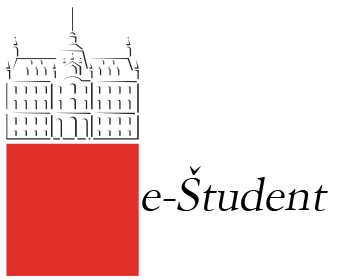
<style>
.page{position:relative;width:338px;height:280px;background:#ffffff}
.page>*{position:absolute;margin:0}
.t1{font:50px "Garamond";color:#000000;font-style:italic}
</style>
<div class="page">
<p class="t1" style="left:142px;top:166px;width:186px;height:45px">e-Študent</p>
</div>
